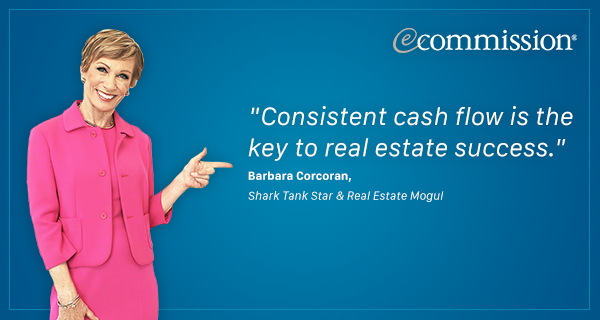
<style>
.page{position:relative;width:600px;height:320px}
.page>*{position:absolute;margin:0}
.t1{font:26px "SanFranciscoText-Italic";color:#ffffff}
.t2{font:12px/20px "SanFranciscoText-Italic";color:#ffffff}
.t3{font:12px/20px "SanFranciscoText-Bold";color:#ffffff}
</style>
<div class="page">
<p class="t1" style="left:248px;top:106px;width:325px;height:55px">"Consistent cash flow is the<br>key to real estate success."</p>
<p class="t2" style="left:248px;top:171px;width:196px;height:31px"><span class="t3">Barbara Corcoran,<br></span>Shark Tank Star &amp; Real Estate Mogul</p>
</div>
